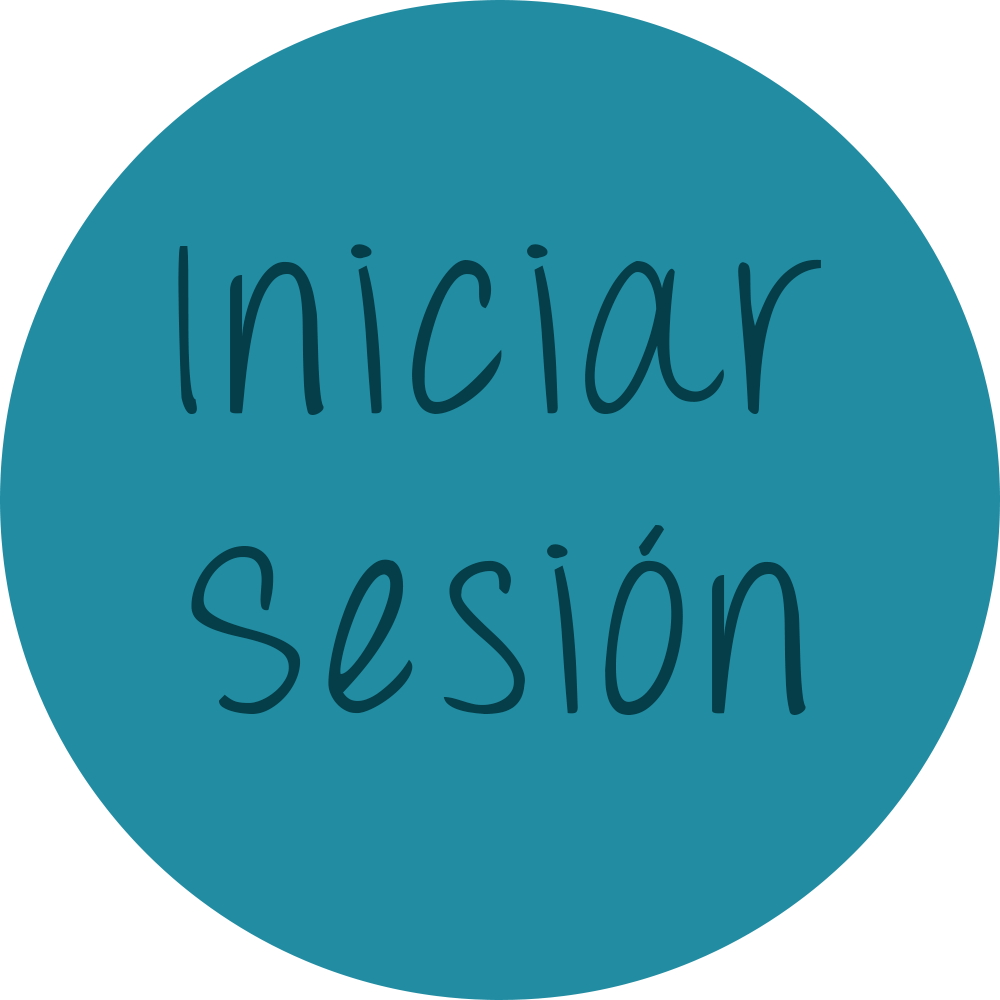
<style>
.page{position:relative;width:1000px;height:1000px;background:#228ca2}
.page>*{position:absolute;margin:0}
.t1{font:250px "ThrowMyHandsUpintheAir";letter-spacing:0.075em;color:#053e49}
</style>
<div class="page">
<p class="t1" style="left:178px;top:244px;width:643px;height:471px;text-align:center">Iniciar<br>Sesión</p>
</div>
